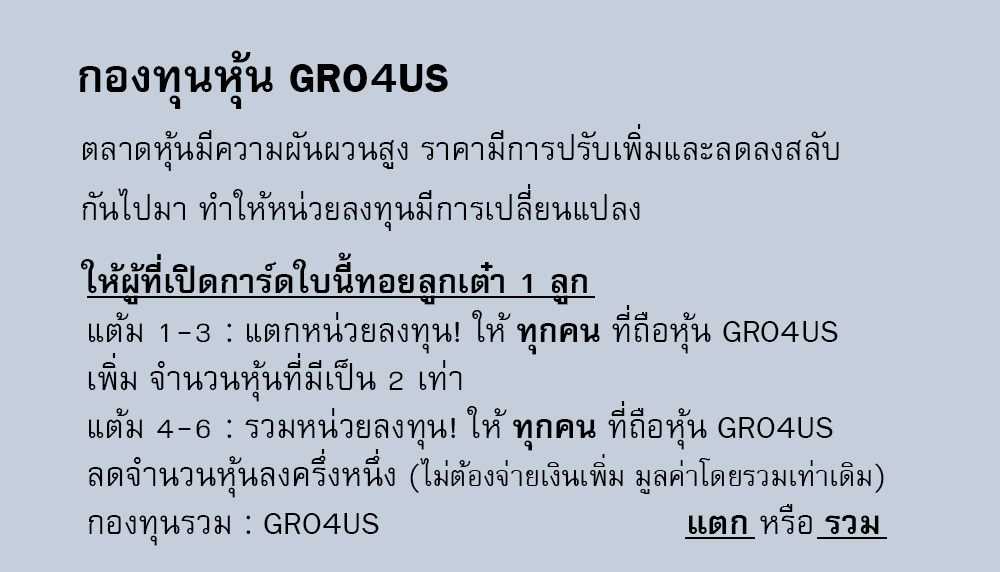
<style>
.page{position:relative;width:1000px;height:572px;background:#c5cedb}
.page>*{position:absolute;margin:0}
.t1{font:64px "FreesiaUPCBold";color:#000000}
.t2{font:45px/60px "FreesiaUPC";color:#000000}
.t3{font:47px "FreesiaUPCBold";color:#000000}
.t4{font:46px/48px "FreesiaUPC";color:#000000}
.t5{font:46px/48px "FreesiaUPCBold";color:#000000}
.t6{font:40px/48px "FreesiaUPC";color:#000000}
</style>
<div class="page">
<p class="t1" style="left:79px;top:50px;width:369px;height:59px">กองทุนหุ้น GRO4US</p>
<p class="t2" style="left:82px;top:124px;width:757px;height:107px">ตลาดหุ้นมีความผันผวนสูง ราคามีการปรับเพิ่มและลดลงสลับ<br>กันไปมา ทำให้หน่วยลงทุนมีการเปลี่ยนแปลง</p>
<p class="t3" style="left:81px;top:252px;width:506px;height:53px">ให้ผู้ที่เปิดการ์ดใบนี้ทอยลูกเต๋า 1 ลูก</p>
<p class="t4" style="left:88px;top:305px;width:796px;height:241px">แต้ม 1-3 : แตกหน่วยลงทุน! ให้ <span class="t5">ทุกคน </span>ที่ถือหุ้น GRO4US<br>เพิ่ม จำนวนหุ้นที่มีเป็น 2 เท่า<br>แต้ม 4-6 : รวมหน่วยลงทุน! ให้ <span class="t5">ทุกคน </span>ที่ถือหุ้น GRO4US<br>ลดจำนวนหุ้นลงครึ่งหนึ่ง <span class="t6">(ไม่ต้องจ่ายเงินเพิ่ม มูลค่าโดยรวมเท่าเดิม)<br></span>กองทุนรวม : GRO4US                              <span class="t5">แตก</span> หรือ <span class="t5">รวม</span></p>
</div>
